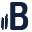
<style>
.page{position:relative;width:32px;height:32px;background:#ffffff}
.page>*{position:absolute;margin:0}
.t1{font:38px "Dosis-Bold";color:#11223d}
</style>
<div class="page">
<p class="t1" style="left:10px;top:2px;width:19px;height:28px">B</p>
</div>
